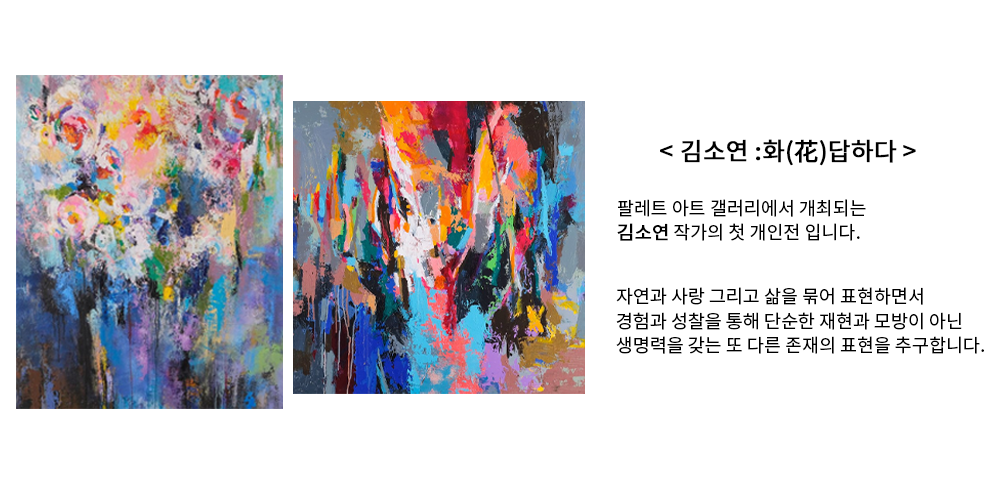
<style>
.page{position:relative;width:1000px;height:480px;background:#ffffff}
.page>*{position:absolute;margin:0}
.t1{font:24.3px "NotoSansKR-Regular";color:#000000;font-weight:bold}
.t2{font:18.4px/24.6px "NotoSansKR-Regular";color:#000000}
.t3{font:18.4px/24.6px "NotoSansKR-Regular";color:#000000;font-weight:bold}
</style>
<div class="page">
<p class="t1" style="left:660px;top:139px;width:256px;height:27px">&lt; 김소연 :화(花)답하다 &gt;</p>
<p class="t2" style="left:617px;top:199px;width:249px;height:42px">팔레트 아트 갤러리에서 개최되는 <br><span class="t3">김소연</span> 작가의 첫 개인전 입니다.</p>
<p class="t2" style="left:616px;top:287px;width:368px;height:67px">자연과 사랑 그리고 삶을 묶어 표현하면서 <br>경험과 성찰을 통해 단순한 재현과 모방이 아닌<br>생명력을 갖는 또 다른 존재의 표현을 추구합니다.</p>
</div>
